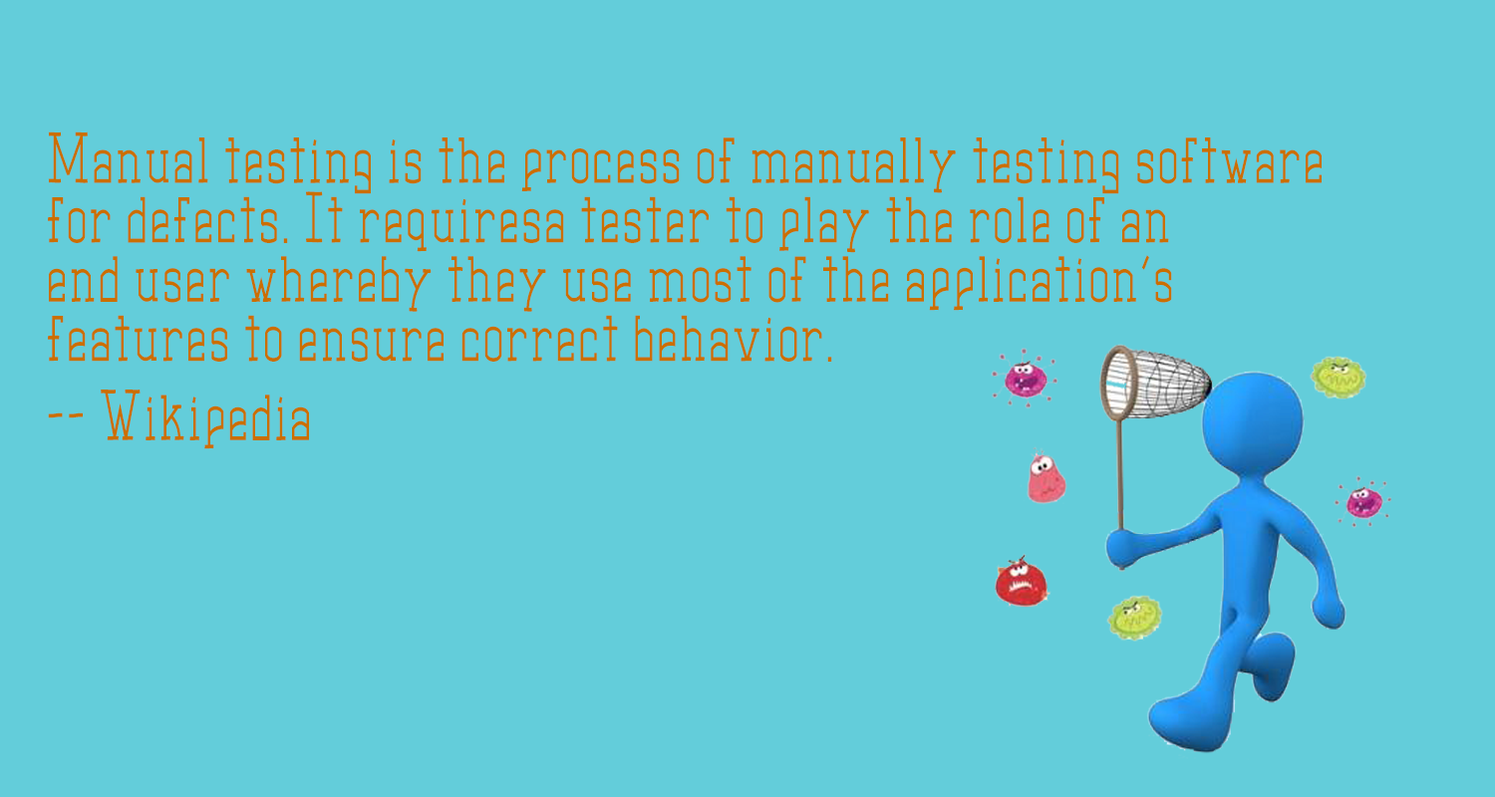
<style>
.page{position:relative;width:1495px;height:797px;background:#63cdda}
.page>*{position:absolute;margin:0}
.t1{font:62.8px/19.8px "BowlodromeJiggs";letter-spacing:0.025em;color:#cb6f00;scale:0.68 1}
</style>
<div class="page">
<p class="t1" style="left:48px;top:132px;width:1274px;height:318px">Manual testing is the process of manually testing software<br><br><br>for defects. It requiresa tester to play the role of an<br><br> <br>end user whereby they use most of the application's<br><br><br>features to ensure correct behavior.<br><br><br> <br>-- Wikipedia</p>
</div>
